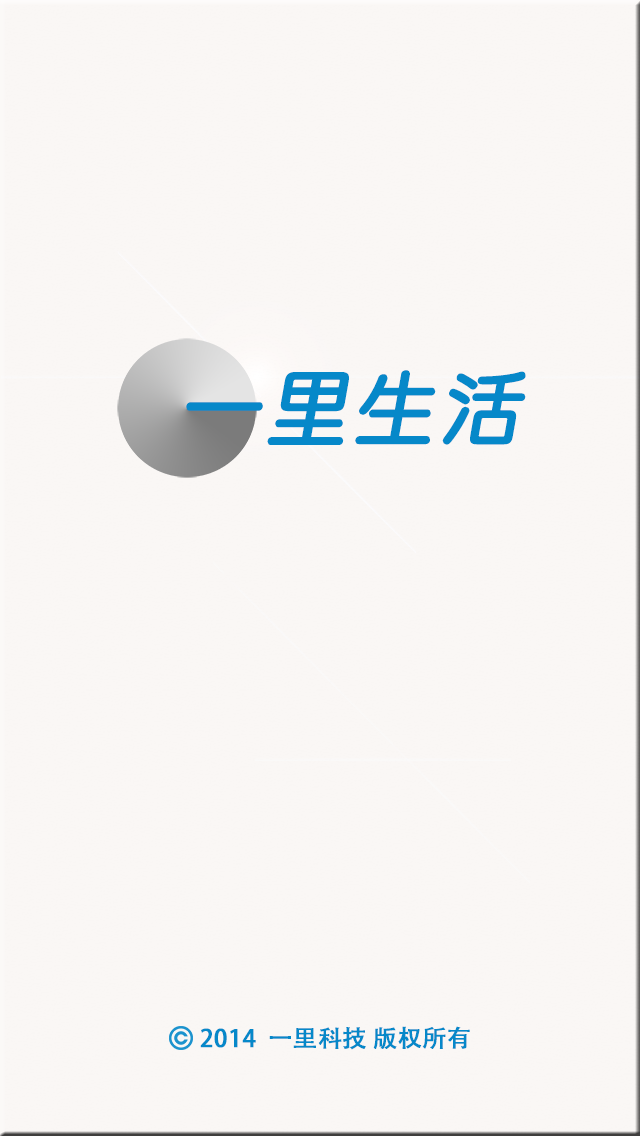
<style>
.page{position:relative;width:640px;height:1136px;background:#faf7f5}
.page>*{position:absolute;margin:0}
.t1{font:80px "STYuanti-SC-Regular";letter-spacing:0.05em;color:#0688c9;font-weight:bold;font-style:italic}
.t2{font:24px "AdobeHeitiStd-Regular";color:#0688c9;font-weight:bold}
</style>
<div class="page">
<p class="t1" style="left:186px;top:370px;width:340px;height:75px">一里生活</p>
<p class="t2" style="left:200px;top:1026px;width:270px;height:24px">2014  一里科技 版权所有</p>
</div>
